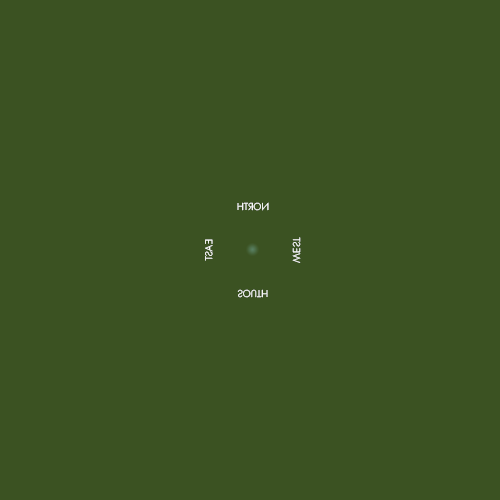
<style>
.page{position:relative;width:500px;height:500px;background:#3b5222}
.page>*{position:absolute;margin:0}
.t1{font:10px "JostRoman-Light";color:#ffffff}
.t2{font:10px "JostRoman-Light"}
</style>
<div class="page">
<p class="t1" style="left:237px;top:202px;width:32px;height:9px;rotate:180deg">NORTH</p>
<p class="t1" style="left:205px;top:239px;width:8px;height:22px;rotate:90deg">EAST</p>
<p class="t2" style="left:292px;top:237px;width:9px;height:26px;rotate:-90deg">WEST</p>
<p class="t1" style="left:237px;top:289px;width:31px;height:9px">SOUTH</p>
</div>
